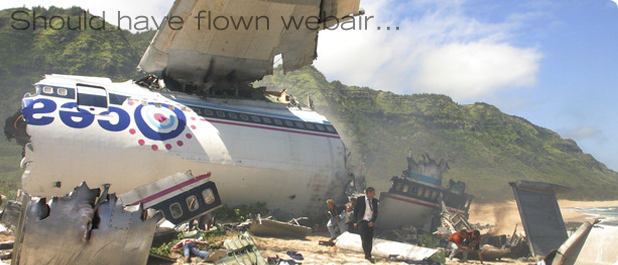
<style>
.page{position:relative;width:618px;height:265px}
.page>*{position:absolute;margin:0}
.t1{font:25.7px "TradeGothicLT-Extended"}
</style>
<div class="page">
<p class="t1" style="left:10px;top:10px;width:389px;height:21px">Should have flown webair...</p>
</div>
